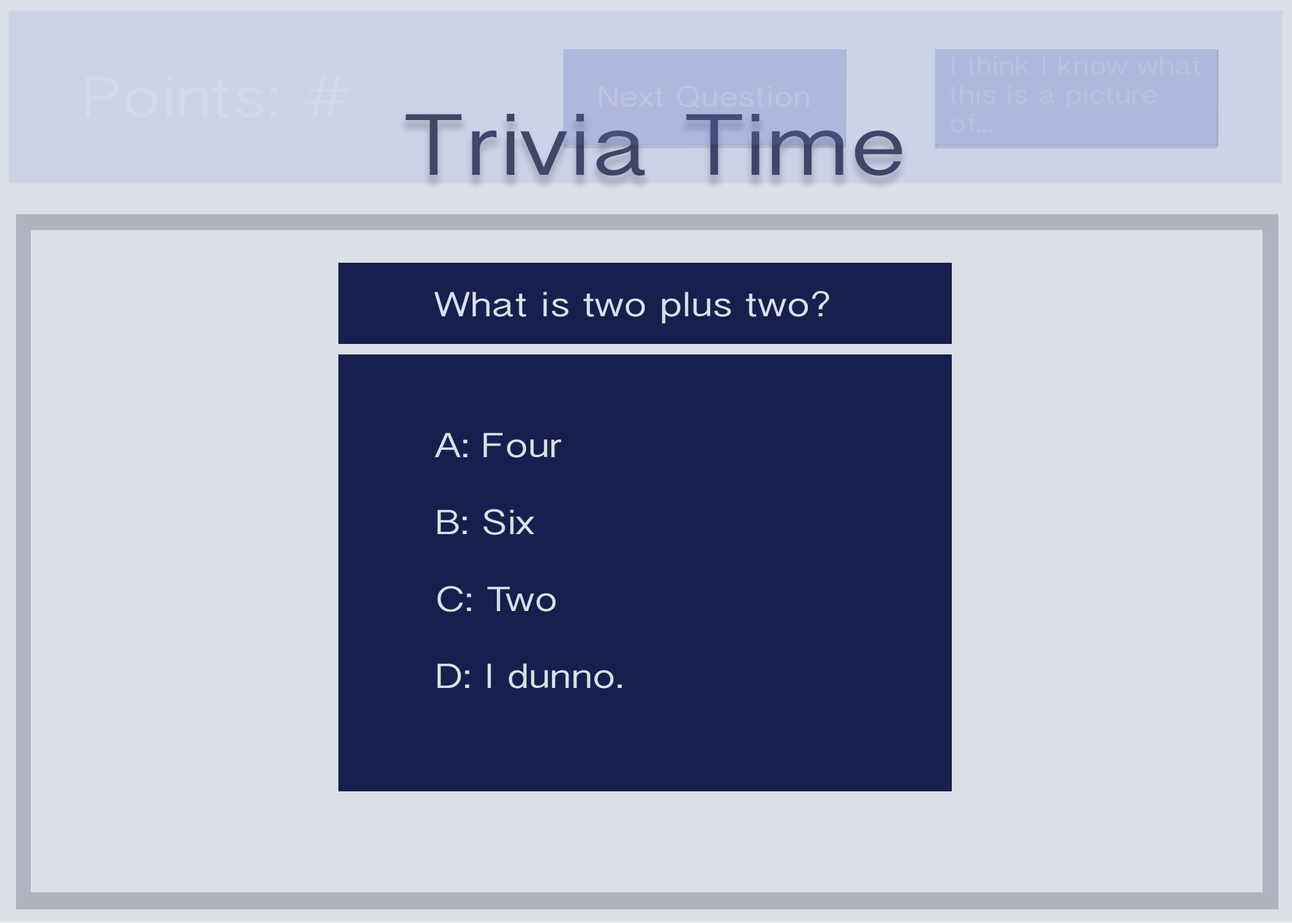
<style>
.page{position:relative;width:1292px;height:923px;background:#dbe0e7}
.page>*{position:absolute;margin:0}
.t1{font:23.1px "BanglaSangamMN";color:#bac1df;scale:1.2 1}
.t2{font:51.3px "BanglaSangamMN";color:#d5d7ea;scale:1.2 1}
.t3{font:25.6px "BanglaSangamMN";color:#c0c2e2;scale:1.2 1}
.t4{font:76.9px "BanglaSangamMN";color:#404667;scale:1.2 1}
.t5{font:30.8px "BanglaSangamMN";color:#dae0e7;scale:1.2 1}
.t6{font:7.4px "BanglaSangamMN";color:#dae0e7;scale:1.2 1}
</style>
<div class="page">
<p class="t1" style="left:949px;top:56px;width:251px;height:77px">I think I know what this is a picture of...</p>
<p class="t2" style="left:85px;top:76px;width:264px;height:42px">Points: #</p>
<p class="t3" style="left:599px;top:86px;width:210px;height:22px">Next Question</p>
<p class="t4" style="left:405px;top:114px;width:497px;height:62px">Trivia Time</p>
<p class="t5" style="left:434px;top:291px;width:395px;height:33px">What is two plus two?</p>
<p class="t6" style="left:435px;top:433px;width:187px;height:255px">A: Four<br><br>B: Six<br><br>C: Two<br><br>D: I dunno.</p>
</div>
